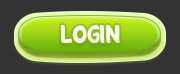
<style>
.page{position:relative;width:180px;height:74px;background:#333333}
.page>*{position:absolute;margin:0}
.t1{font:25px "Cartwheel";color:#ffffff}
</style>
<div class="page">
<p class="t1" style="left:60px;top:25px;width:60px;height:18px">LOGIN</p>
</div>
